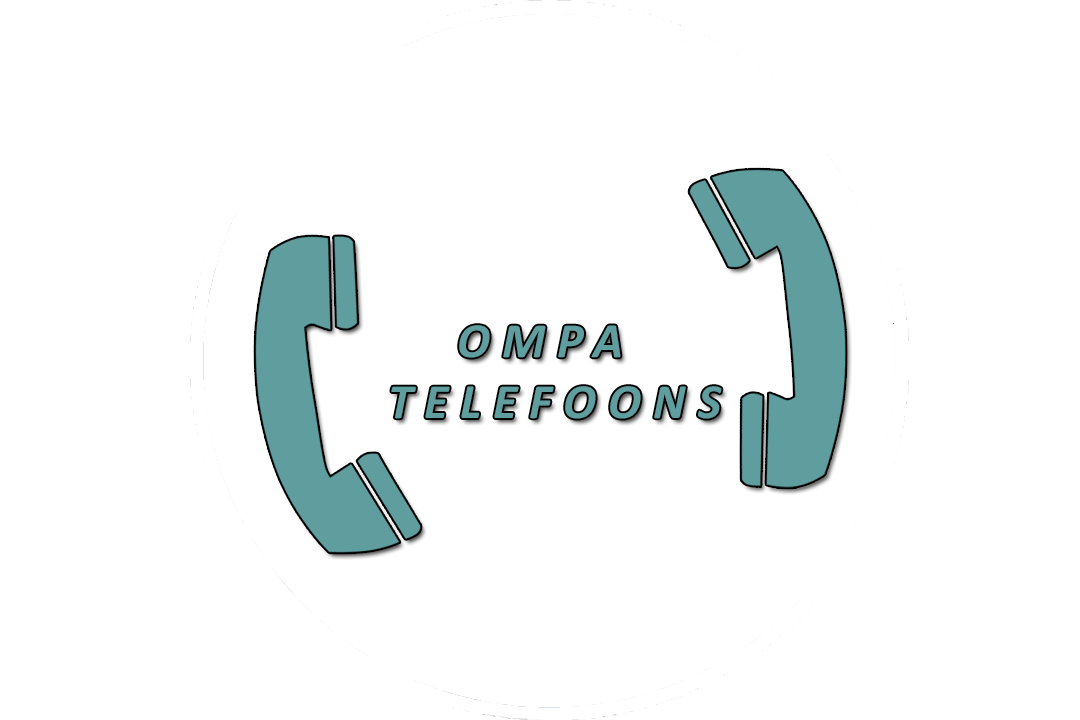
<style>
.page{position:relative;width:1080px;height:720px;background:#ffffff}
.page>*{position:absolute;margin:0}
.t1{font:49.5px/60.7px "Calibri-BoldItalic";letter-spacing:0.24em;color:#609d9f;text-transform:uppercase}
</style>
<div class="page">
<p class="t1" style="left:391px;top:325px;width:331px;height:94px">Ompa<br>Telefoons</p>
</div>
